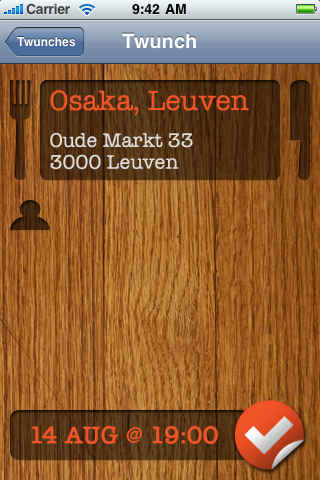
<style>
.page{position:relative;width:320px;height:480px}
.page>*{position:absolute;margin:0}
.t1{font:28.6px "AmericanTypewriter";color:#f05528}
.t2{font:20px/0px "AmericanTypewriter";color:#dbdbda}
.t3{font:24px "AmericanTypewriter";color:#f05528;font-weight:bold}
.t4{font:24px "AmericanTypewriter";color:#f05528}
</style>
<div class="page">
<p class="t1" style="left:50px;top:90px;width:199px;height:26px">Osaka, Leuven</p>
<p class="t2" style="left:50px;top:133px;width:143px;height:37px">Oude Markt 33<br>3000 Leuven</p>
<p class="t3" style="left:31px;top:426px;width:187px;height:18px">14 AUG <span class="t4">@</span> 19:00</p>
</div>
